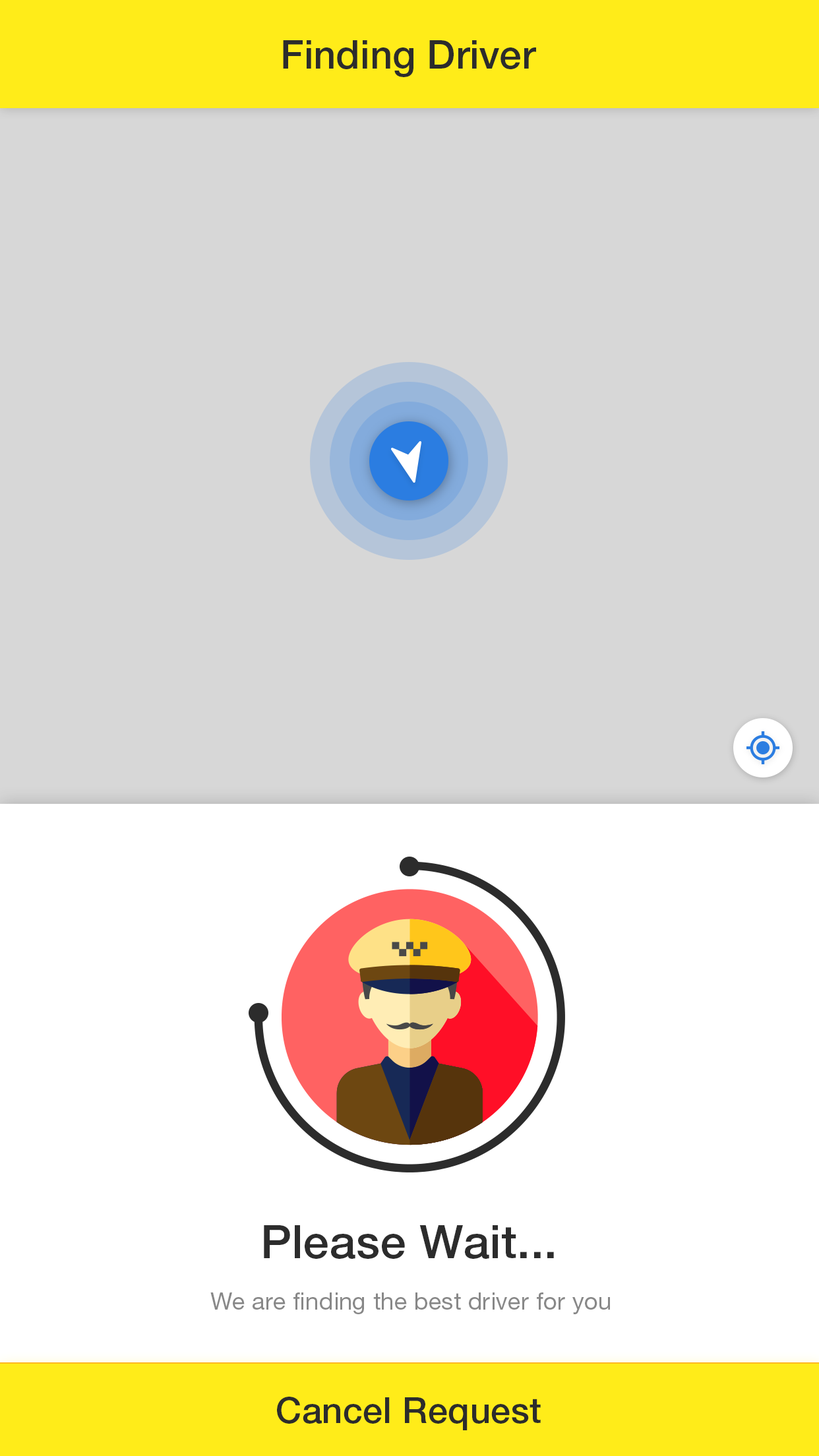
<style>
.page{position:relative;width:819px;height:1456px;background:#d7d7d7}
.page>*{position:absolute;margin:0}
.t1{font:39.6px "HelveticaNeueLTStd-Md";color:#2c2c2c}
.t2{font:46.2px "HelveticaNeueLTStd-Md";letter-spacing:0.01em;color:#2c2c2c}
.t3{font:23.7px "HelveticaNeueLTStd-Roman";letter-spacing:0.01em;color:#888888}
.t4{font:35.6px "HelveticaNeueLTStd-Md";letter-spacing:0.01em;color:#2c2c2c}
</style>
<div class="page">
<p class="t1" style="left:283px;top:40px;width:253px;height:37px">Finding Driver</p>
<p class="t2" style="left:264px;top:1225px;width:290px;height:34px">Please Wait...</p>
<p class="t3" style="left:210px;top:1292px;width:400px;height:22px">We are finding the best driver for you</p>
<p class="t4" style="left:277px;top:1397px;width:264px;height:33px">Cancel Request</p>
</div>
